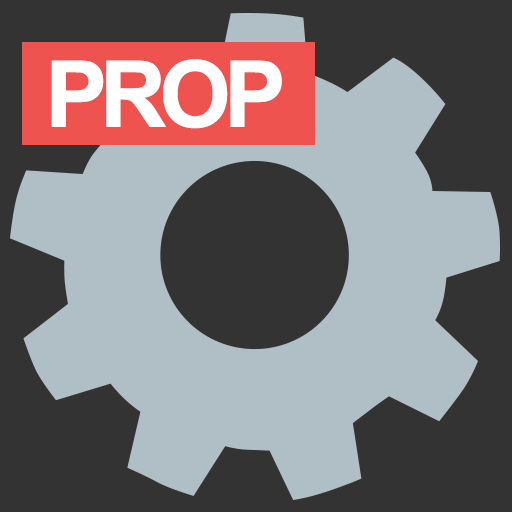
<style>
.page{position:relative;width:512px;height:512px;background:#333333}
.page>*{position:absolute;margin:0}
.t1{font:91.7px "Arial-BoldMT";letter-spacing:-0.1em;color:#ffffff;font-weight:bold}
</style>
<div class="page">
<p class="t1" style="left:51px;top:59px;width:231px;height:70px">PROP</p>
</div>
